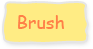
<style>
.page{position:relative;width:93px;height:49px;background:#ffec84}
.page>*{position:absolute;margin:0}
.t1{font:18px "ComicSansMS";color:#ff8047}
</style>
<div class="page">
<p class="t1" style="left:18px;top:15px;width:46px;height:14px">Brush</p>
</div>
